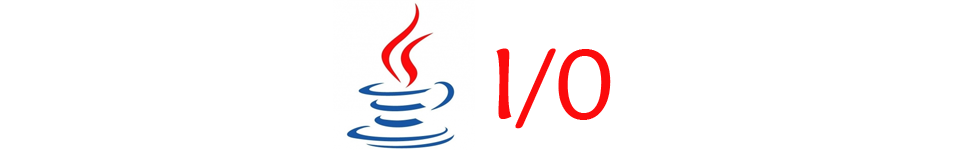
<style>
.page{position:relative;width:977px;height:150px;background:#ffffff}
.page>*{position:absolute;margin:0}
.t1{font:100px "STXinwei";color:#fb0b0c}
</style>
<div class="page">
<p class="t1" style="left:496px;top:48px;width:115px;height:81px">I/0</p>
</div>
